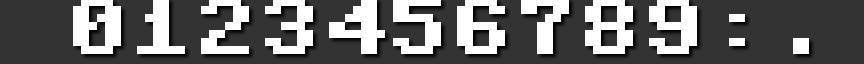
<style>
.page{position:relative;width:864px;height:64px;background:#333333}
.page>*{position:absolute;margin:0}
.t1{font:64px "C64ProMono-Style";color:#ffffff}
</style>
<div class="page">
<p class="t1" style="left:73px;top:0px;width:736px;height:54px">0123456789:.</p>
</div>
